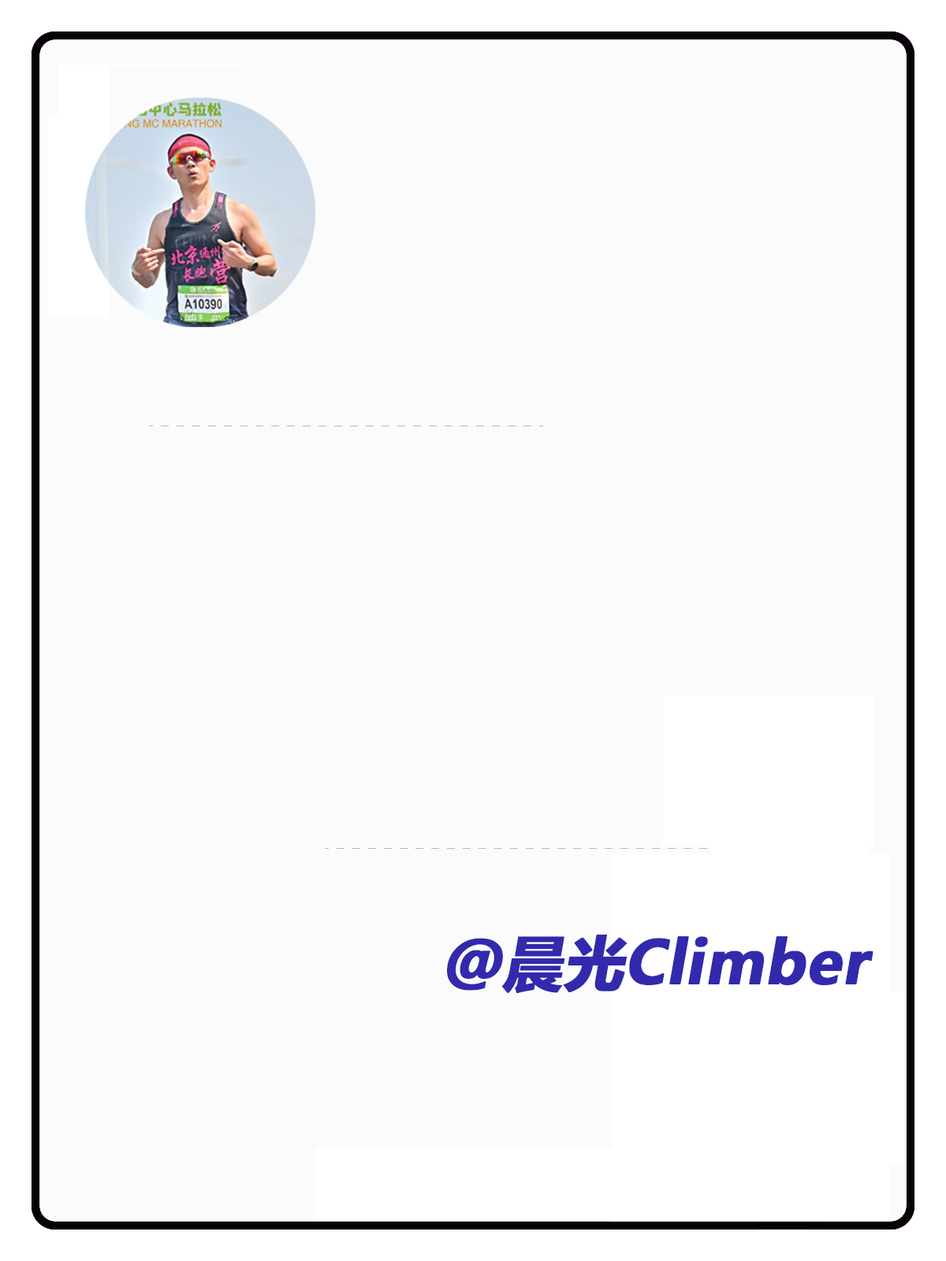
<style>
.page{position:relative;width:946px;height:1261px;background:#fbfbfb}
.page>*{position:absolute;margin:0}
.t1{font:59.1px "MicrosoftYaHei-Bold";color:#3229ad;font-weight:bold;font-style:italic}
</style>
<div class="page">
<p class="t1" style="left:447px;top:934px;width:426px;height:59px">@晨光Climber</p>
</div>
